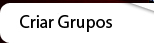
<style>
.page{position:relative;width:154px;height:43px;background:#ffffff}
.page>*{position:absolute;margin:0}
.t1{font:18px "MyriadPro-Regular";color:#000000}
</style>
<div class="page">
<p class="t1" style="left:20px;top:15px;width:92px;height:17px">Criar Grupos</p>
</div>
